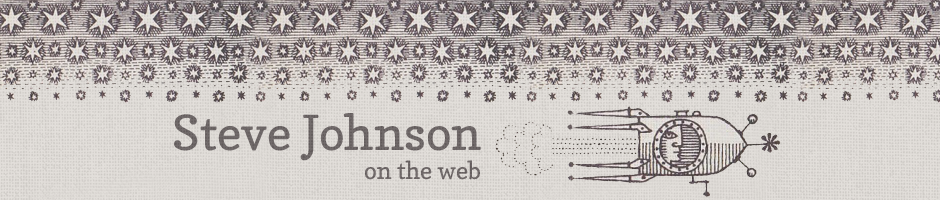
<style>
.page{position:relative;width:940px;height:200px}
.page>*{position:absolute;margin:0}
.t1{font:48px "Copse";color:#6e6868}
.t2{font:24px "Copse";color:#6f6868}
</style>
<div class="page">
<p class="t1" style="left:174px;top:113px;width:307px;height:48px">Steve Johnson</p>
<p class="t2" style="left:365px;top:160px;width:115px;height:20px">on the web</p>
</div>
